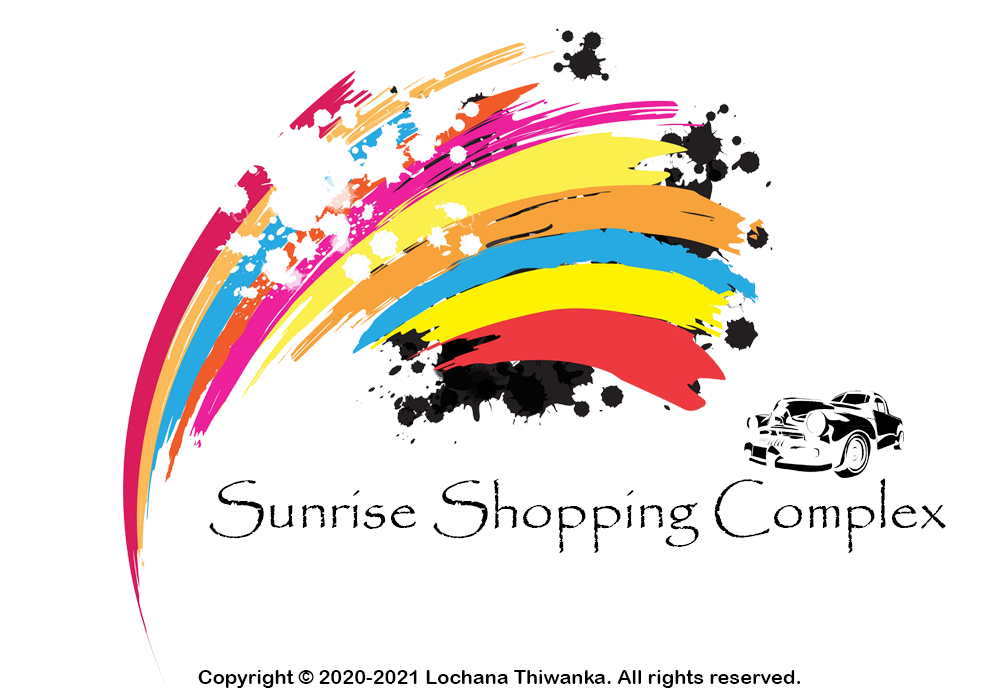
<style>
.page{position:relative;width:1000px;height:700px;background:#ffffff}
.page>*{position:absolute;margin:0}
.t1{font:60px "Papyrus-Regular";color:#000000}
.t2{font:20px "ArialRoundedMTBold";color:#000000}
</style>
<div class="page">
<p class="t1" style="left:209px;top:478px;width:737px;height:75px">Sunrise Shopping Complex</p>
<p class="t2" style="left:198px;top:670px;width:603px;height:18px">Copyright © 2020-2021 Lochana Thiwanka. All rights reserved.</p>
</div>
